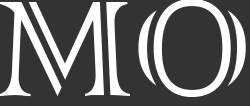
<style>
.page{position:relative;width:250px;height:106px;background:#333333}
.page>*{position:absolute;margin:0}
.t1{font:179.7px "ColonnaMT";color:#ffffff}
</style>
<div class="page">
<p class="t1" style="left:0px;top:0px;width:246px;height:97px">MO</p>
</div>
